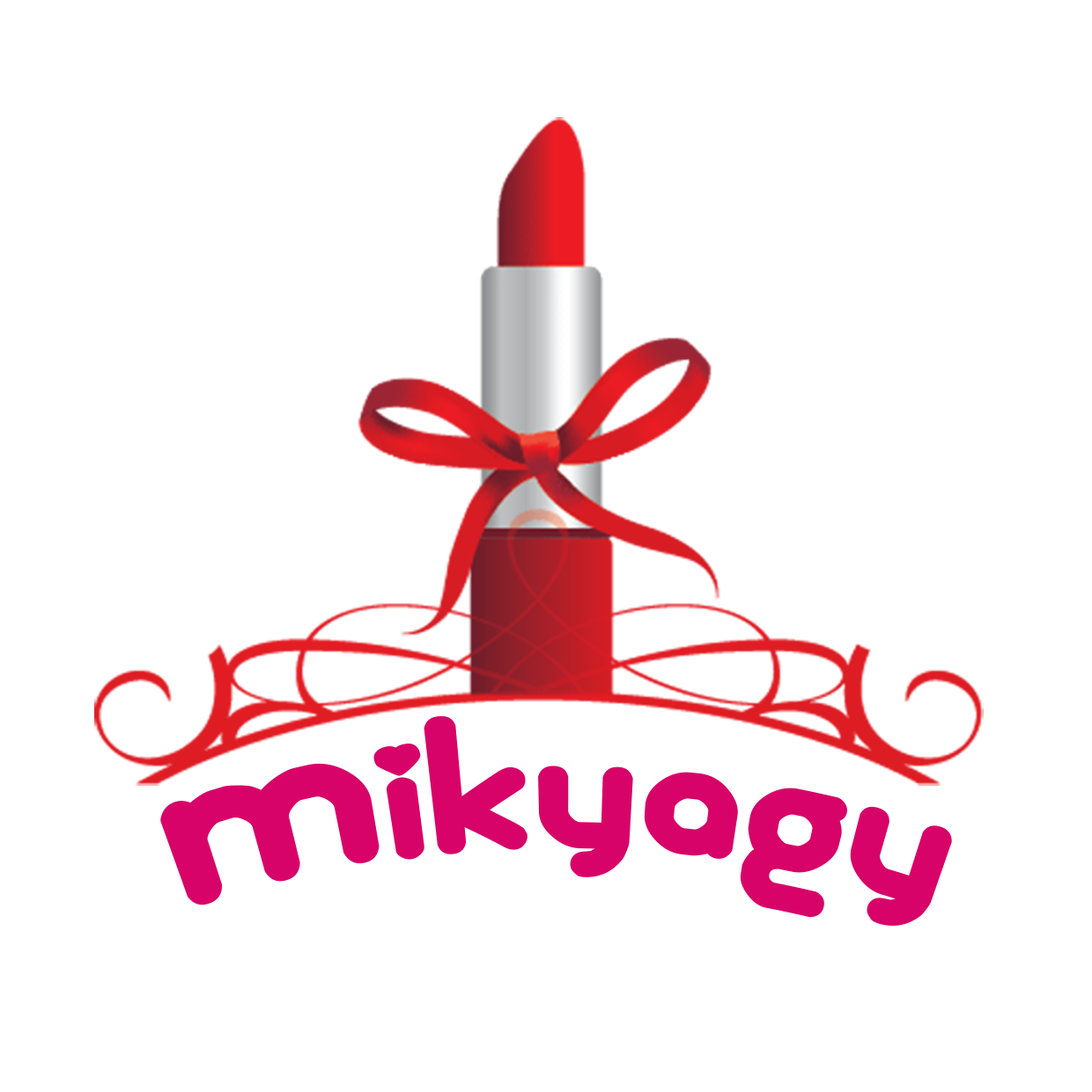
<style>
.page{position:relative;width:1092px;height:1092px;background:#ffffff}
.page>*{position:absolute;margin:0}
.t1{font:196px "Glamourgirl";color:#d80368}
.t2{font:252.1px "Glamourgirl";color:#d80368}
</style>
<div class="page">
<p class="t1" style="left:160px;top:716px;width:792px;height:210px"><span class="t2">m</span>ikyagy</p>
</div>
